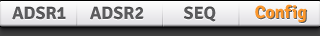
<style>
.page{position:relative;width:320px;height:36px}
.page>*{position:absolute;margin:0}
.t1{font:18px "Signika-Bold";color:#5c5c5e}
.t2{font:18px "Signika-Bold";color:#fc972b}
</style>
<div class="page">
<p class="t1" style="left:12px;top:5px;width:296px;height:18px">ADSR1      ADSR2          SEQ          Config</p>
<p class="t2" style="left:255px;top:4px;width:52px;height:18px">Config</p>
</div>
